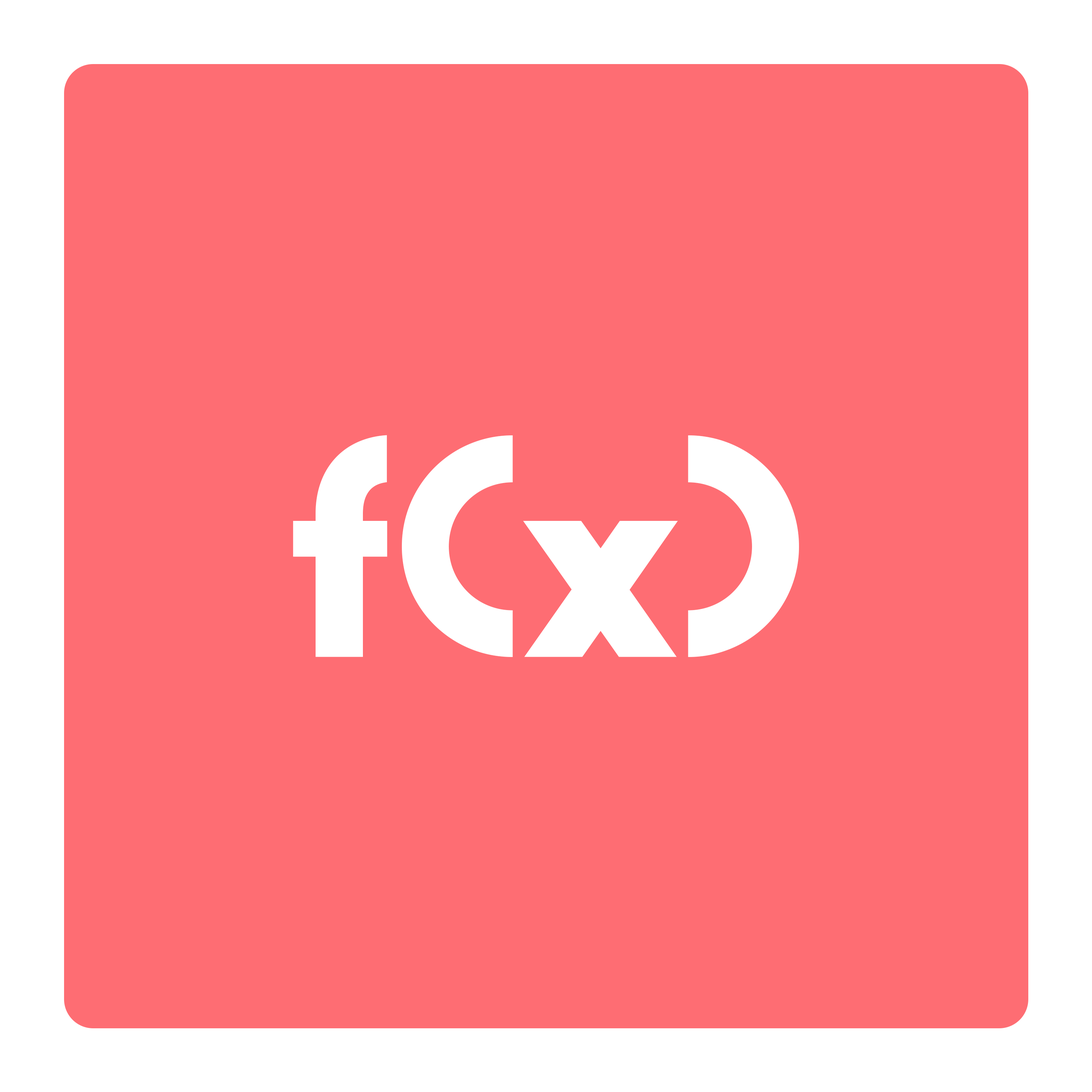
<style>
.page{position:relative;width:1092px;height:1092px;background:#fe6d73}
.page>*{position:absolute;margin:0}
.t1{font:295.6px "BigJohnPRO-Bold";color:#ffffff}
</style>
<div class="page">
<p class="t1" style="left:293px;top:435px;width:506px;height:222px">f(x)</p>
</div>
